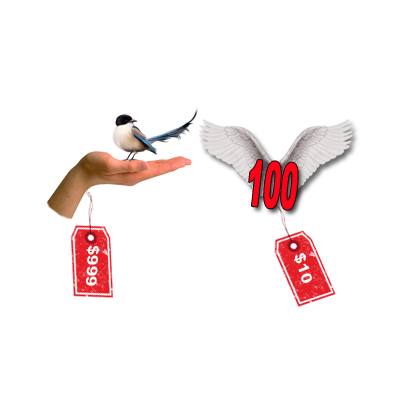
<style>
.page{position:relative;width:400px;height:400px;background:#ffffff}
.page>*{position:absolute;margin:0}
.t1{font:63.3px "Arial-Black";color:#fc031a;scale:0.4 1}
.t2{font:14.5px "Arial-BoldMT";color:#fefefe;scale:1.3 1}
</style>
<div class="page">
<p class="t1" style="left:249px;top:160px;width:49px;height:50px;rotate:4deg">100</p>
<p class="t2" style="left:86px;top:245px;width:14px;height:41px;rotate:93deg">$999</p>
<p class="t2" style="left:294px;top:253px;width:18px;height:30px;rotate:73deg">$10</p>
</div>
